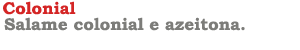
<style>
.page{position:relative;width:300px;height:50px;background:#ffffff}
.page>*{position:absolute;margin:0}
.t1{font:17px "BookmanOldStyle-Bold";color:#d42525}
.t2{font:17px "BookmanOldStyle-Bold";color:#7c7c79}
</style>
<div class="page">
<p class="t1" style="left:3px;top:1px;width:73px;height:14px">Colonial</p>
<p class="t2" style="left:4px;top:17px;width:241px;height:14px">Salame colonial e azeitona.</p>
</div>
